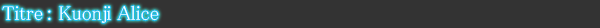
<style>
.page{position:relative;width:600px;height:28px;background:#333333}
.page>*{position:absolute;margin:0}
.t1{font:20px "MS-PMincho";color:#ffffff}
</style>
<div class="page">
<p class="t1" style="left:2px;top:5px;width:157px;height:18px">Titre : Kuonji Alice</p>
</div>
